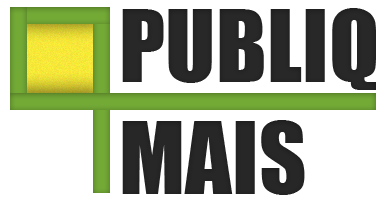
<style>
.page{position:relative;width:386px;height:200px;background:#ffffff}
.page>*{position:absolute;margin:0}
.t1{font:92.1px "Impact";color:#282828;text-transform:uppercase}
.t2{font:92.1px "Impact";color:#272727;text-transform:uppercase}
</style>
<div class="page">
<p class="t1" style="left:122px;top:8px;width:254px;height:82px">Publiq</p>
<p class="t2" style="left:122px;top:120px;width:183px;height:75px">Mais</p>
</div>
